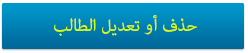
<style>
.page{position:relative;width:248px;height:53px}
.page>*{position:absolute;margin:0}
.t1{font:24px "AdobeArabic-Regular";color:#dafa05}
</style>
<div class="page">
<p class="t1" style="left:54px;top:15px;width:143px;height:21px">حذف أو تعديل الطالب</p>
</div>
